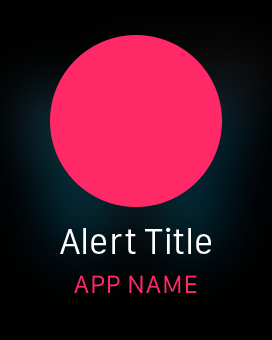
<style>
.page{position:relative;width:272px;height:340px;background:#ff2968}
.page>*{position:absolute;margin:0}
.t1{font:36px "SFCompactText-Regular";letter-spacing:-0.008em;color:#ffffff}
.t2{font:26px "SFCompactText-Regular";letter-spacing:0.016em;color:#ff2968;text-transform:uppercase}
</style>
<div class="page">
<p class="t1" style="left:60px;top:227px;width:151px;height:27px">Alert Title</p>
<p class="t2" style="left:74px;top:275px;width:123px;height:18px">App Name</p>
</div>
